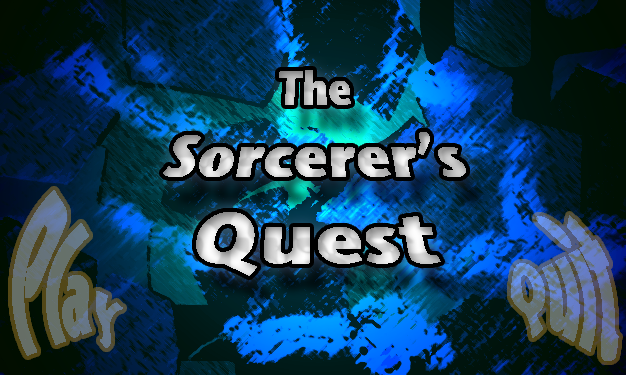
<style>
.page{position:relative;width:626px;height:375px}
.page>*{position:absolute;margin:0}
.t1{font:60px "StoneSansITC-Bold"}
.t2{font:48px "StoneSansITC-Bold"}
.t3{font:72px "StoneSansITC-Bold"}
.t4{font:36px "StoneSansITC-Bold";color:#66716e}
.t5{font:36px "StoneSansITC-Bold"}
</style>
<div class="page">
<p class="t1" style="left:163px;top:70px;width:303px;height:206px;text-align:center"><span class="t2">The<br></span>Sorcerer’s<br><span class="t3">Quest</span></p>
<p class="t4" style="left:12px;top:190px;width:111px;height:166px;text-align:center">Play</p>
<p class="t5" style="left:511px;top:215px;width:108px;height:146px;text-align:center">Quit</p>
</div>
